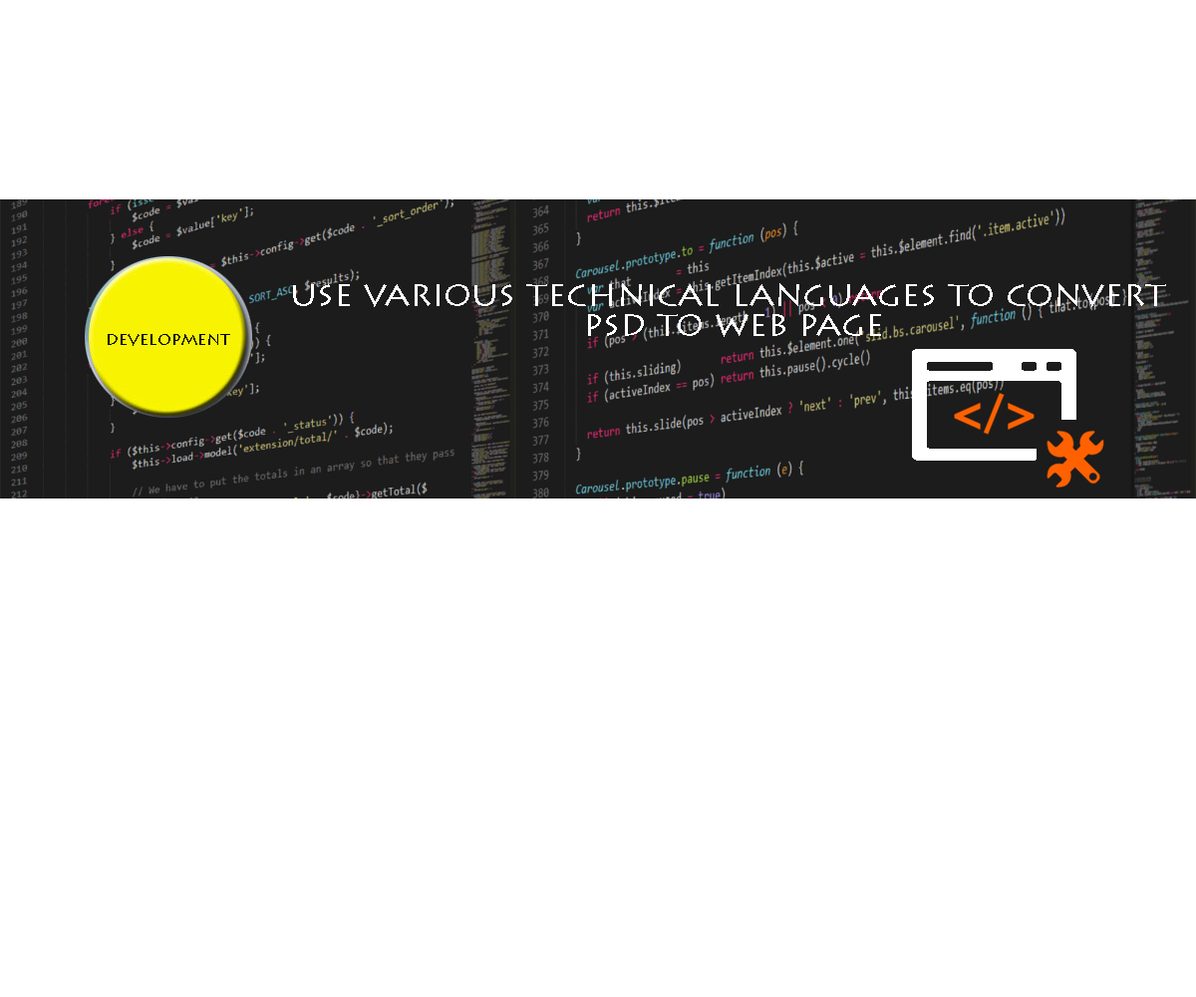
<style>
.page{position:relative;width:1196px;height:997px;background:#ffffff}
.page>*{position:absolute;margin:0}
.t1{font:35.9px/29.9px "LithosPro-Regular";color:#ffffff}
</style>
<div class="page">
<p class="t1" style="left:293px;top:283px;width:873px;height:54px;text-align:center">use various technical languages to convert <br>psd to web page</p>
</div>
